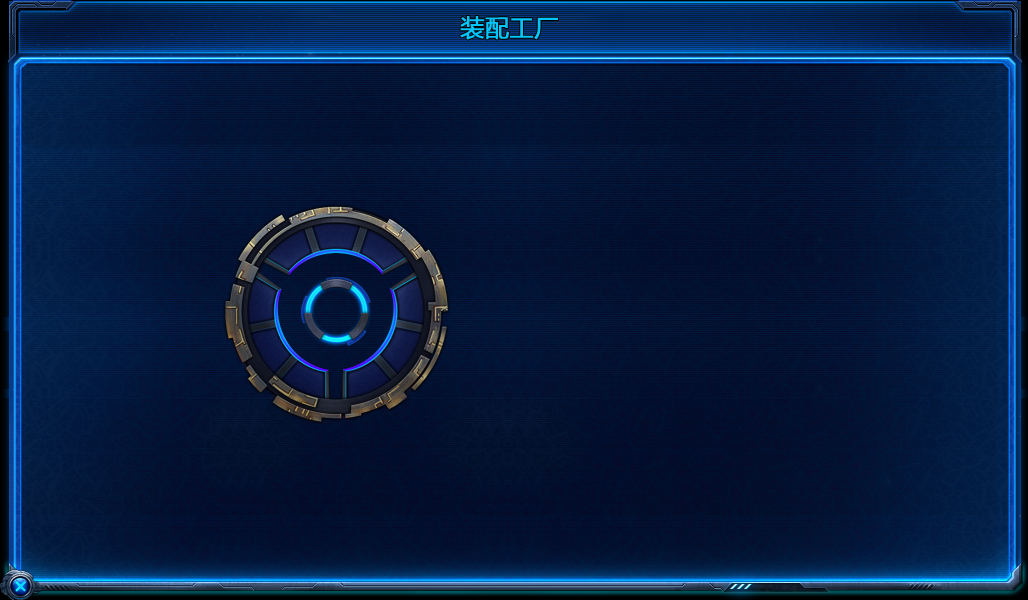
<style>
.page{position:relative;width:1028px;height:600px}
.page>*{position:absolute;margin:0}
.t1{font:24px "MicrosoftYaHei";color:#00c6ff;font-weight:bold}
</style>
<div class="page">
<p class="t1" style="left:460px;top:16px;width:98px;height:24px">装配工厂</p>
</div>
